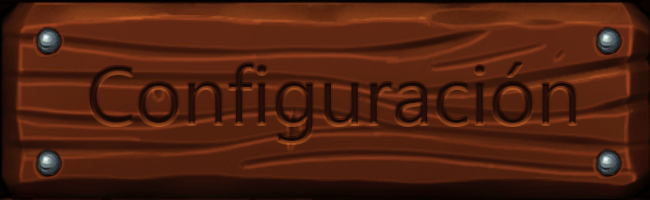
<style>
.page{position:relative;width:650px;height:200px}
.page>*{position:absolute;margin:0}
.t1{font:80px "SegoeUI";color:#200c02}
</style>
<div class="page">
<p class="t1" style="left:89px;top:63px;width:487px;height:80px">Configuración</p>
</div>
